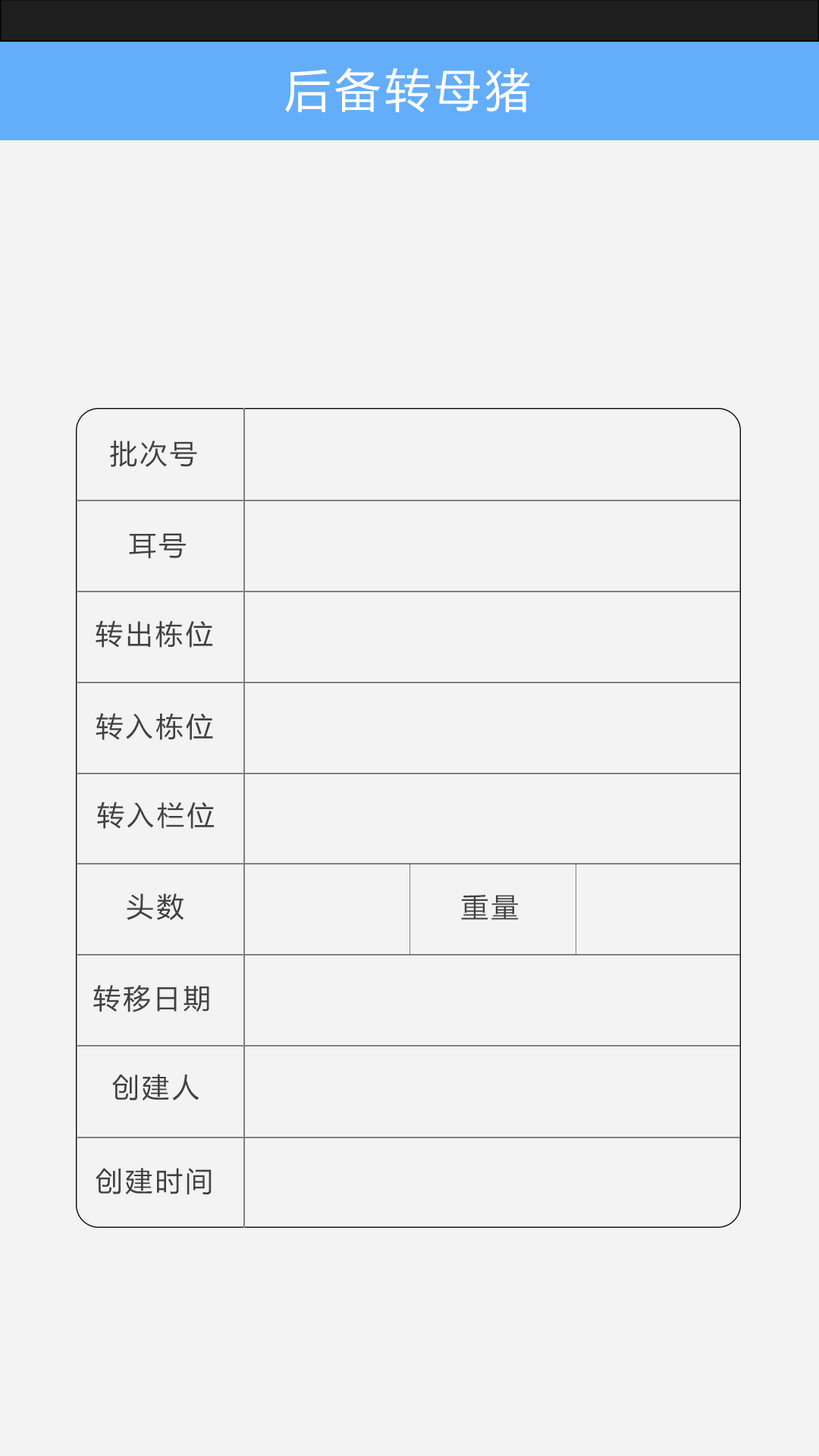
<style>
.page{position:relative;width:819px;height:1456px;background:#f3f3f3}
.page>*{position:absolute;margin:0}
.t1{font:45.5px "MicrosoftYaHei";letter-spacing:0.1em;color:#ffffff}
.t2{font:27.3px "MicrosoftYaHei";letter-spacing:0.1em;color:#414141}
</style>
<div class="page">
<p class="t1" style="left:285px;top:67px;width:245px;height:46px">后备转母猪</p>
<p class="t2" style="left:110px;top:441px;width:87px;height:26px">批次号</p>
<p class="t2" style="left:129px;top:533px;width:57px;height:26px">耳号</p>
<p class="t2" style="left:96px;top:620px;width:117px;height:28px">转出栋位</p>
<p class="t2" style="left:96px;top:713px;width:117px;height:27px">转入栋位</p>
<p class="t2" style="left:97px;top:802px;width:117px;height:27px">转入栏位</p>
<p class="t2" style="left:127px;top:893px;width:57px;height:28px">头数</p>
<p class="t2" style="left:461px;top:895px;width:58px;height:25px">重量</p>
<p class="t2" style="left:93px;top:984px;width:116px;height:28px">转移日期</p>
<p class="t2" style="left:112px;top:1074px;width:87px;height:27px">创建人</p>
<p class="t2" style="left:96px;top:1168px;width:116px;height:26px">创建时间</p>
</div>
